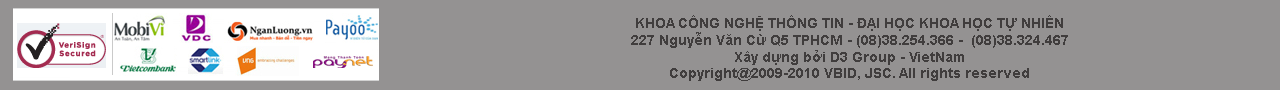
<style>
.page{position:relative;width:1280px;height:90px;background:#949292}
.page>*{position:absolute;margin:0}
.t1{font:14px "Arial-BoldMT";color:#403d3d}
</style>
<div class="page">
<p class="t1" style="left:631px;top:15px;width:437px;height:66px;text-align:center">KHOA CÔNG NGHỆ THÔNG TIN - ĐẠI HỌC KHOA HỌC TỰ NHIÊN<br>227 Nguyễn Văn Cừ Q5 TPHCM - (08)38.254.366 -  (08)38.324.467<br>Xây dựng bởi D3 Group - VietNam<br>Copyright@2009-2010 VBID, JSC. All rights reserved</p>
</div>
